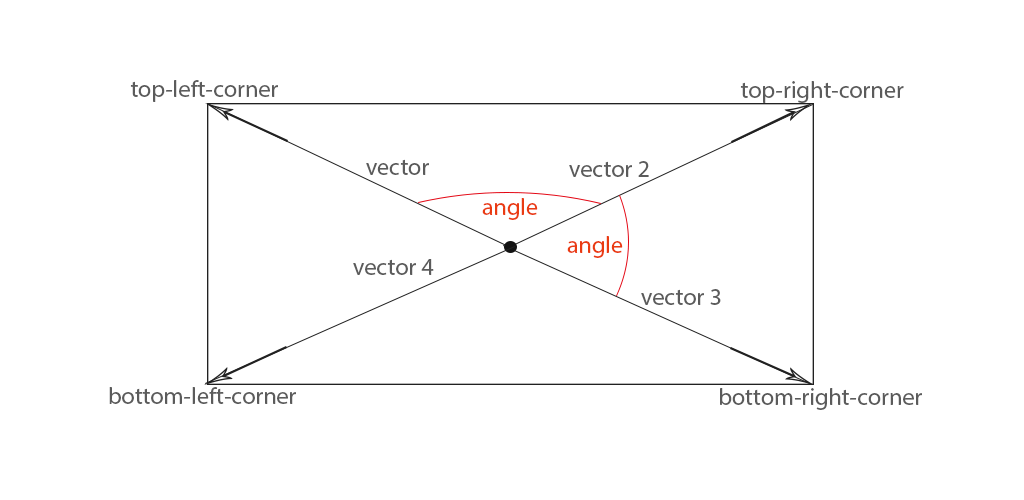
<style>
.page{position:relative;width:1024px;height:500px;background:#ffffff}
.page>*{position:absolute;margin:0}
.t1{font:24px "MyriadPro-Regular";color:#5b5b5b}
.t2{font:24px "MyriadPro-Regular";color:#ea3b12}
</style>
<div class="page">
<p class="t1" style="left:130px;top:80px;width:148px;height:22px">top-left-corner</p>
<p class="t1" style="left:740px;top:81px;width:164px;height:22px">top-right-corner</p>
<p class="t1" style="left:366px;top:159px;width:63px;height:16px">vector</p>
<p class="t1" style="left:569px;top:161px;width:80px;height:16px">vector 2</p>
<p class="t2" style="left:482px;top:198px;width:56px;height:22px">angle</p>
<p class="t2" style="left:567px;top:236px;width:56px;height:22px">angle</p>
<p class="t1" style="left:353px;top:259px;width:81px;height:16px">vector 4</p>
<p class="t1" style="left:641px;top:289px;width:80px;height:16px">vector 3</p>
<p class="t1" style="left:109px;top:387px;width:187px;height:17px">bottom-left-corner</p>
<p class="t1" style="left:720px;top:388px;width:202px;height:22px">bottom-right-corner</p>
</div>
